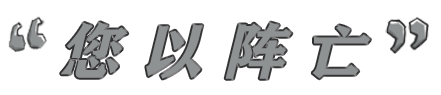
<style>
.page{position:relative;width:441px;height:95px;background:#ffffff}
.page>*{position:absolute;margin:0}
.t1{font:62px "FZCHSJW--GB1-0";letter-spacing:0.32em;color:#8f9293}
</style>
<div class="page">
<p class="t1" style="left:61px;top:22px;width:309px;height:57px">您以阵亡</p>
</div>
